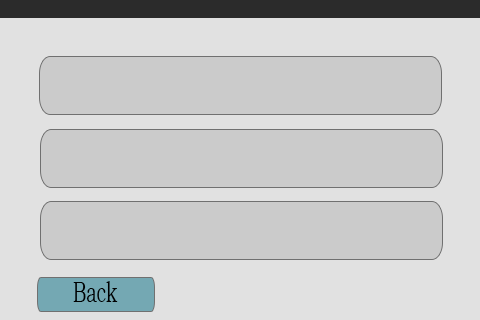
<style>
.page{position:relative;width:480px;height:320px;background:#cbcbcb}
.page>*{position:absolute;margin:0}
.t1{font:29.5px "BookmanOldStyle";color:#000000;scale:0.61 1}
</style>
<div class="page">
<p class="t1" style="left:73px;top:281px;width:45px;height:21px">Back</p>
</div>
